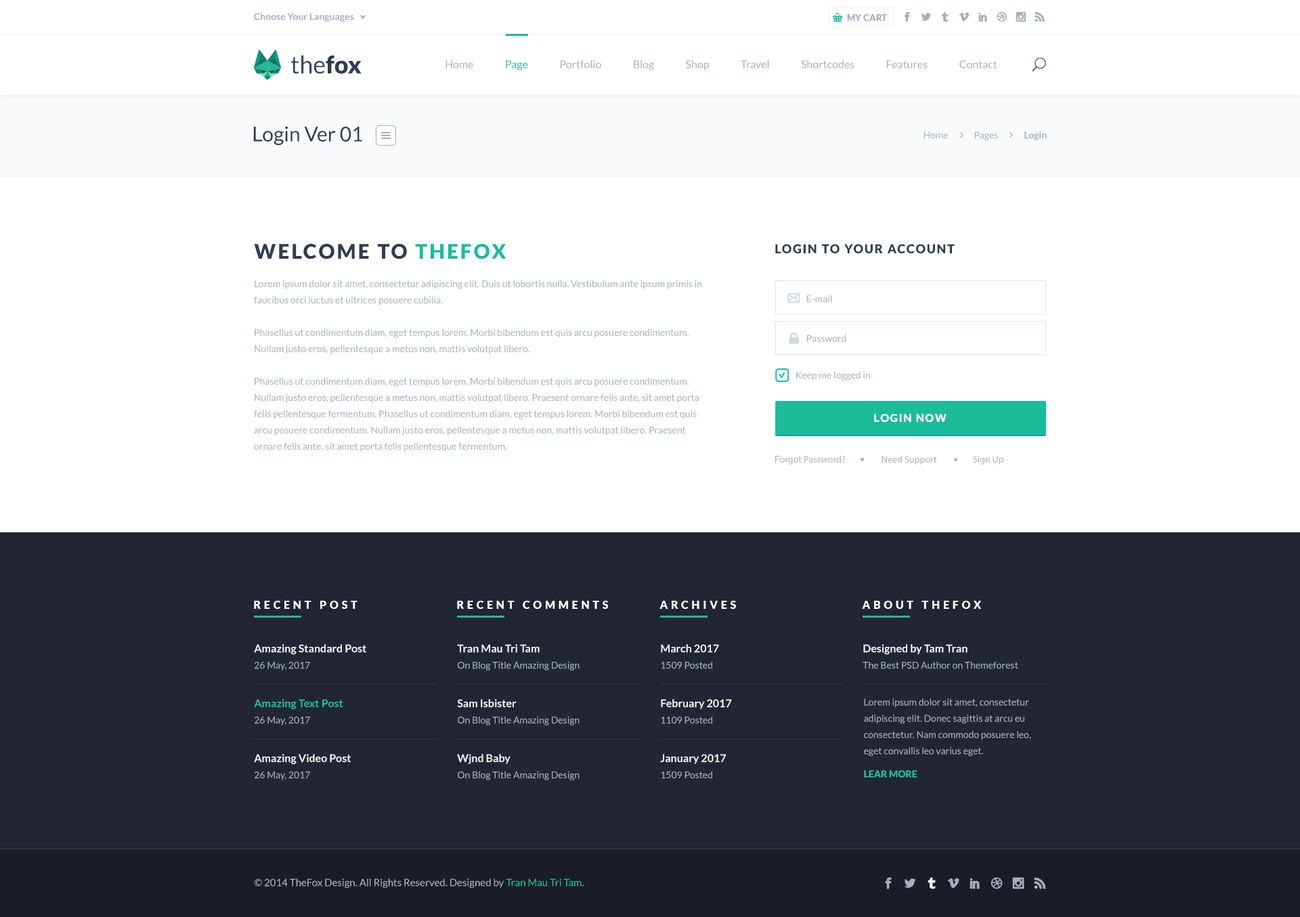
<style>
.page{position:relative;width:1300px;height:917px;background:#ffffff}
.page>*{position:absolute;margin:0}
.t1{font:9.5px "Lato-Bold";color:#a1b1bc}
.t2{font:8.8px "Lato-Black";color:#a1b1bc;text-transform:uppercase}
.t3{font:24.4px "Lato-Regular";color:#34495e}
.t4{font:24.4px "Lato-Black";color:#2c3e50}
.t5{font:10.8px "Lato-Regular";color:#a1b1bc}
.t6{font:10.8px "Lato-Regular";color:#1abc9c}
.t7{font:20.3px "Lato-Regular";color:#2c3e50}
.t8{font:9.5px "Lato-Regular";color:#a1b1bc}
.t9{font:20.3px "Lato-Black";letter-spacing:0.1em;color:#2c3e50;text-transform:uppercase}
.t10{font:20.3px "Lato-Black";letter-spacing:0.1em;color:#1abc9c;text-transform:uppercase}
.t11{font:12.2px "Lato-Black";letter-spacing:0.1em;color:#2c3e50;text-transform:uppercase}
.t12{font:9.5px/16.3px "Lato-Regular";color:#a1b1bc}
.t13{font:10.8px "Lato-Black";letter-spacing:0.1em;color:#ffffff}
.t14{font:9.5px "MyriadPro-Regular";color:#a1b1bc}
.t15{font:10.8px "Lato-Black";letter-spacing:0.3em;color:#ffffff}
.t16{font:10.8px/16.3px "Lato-Bold";color:#ecf0f1}
.t17{font:10.8px/16.3px "Lato-Bold";color:#1abc9c}
.t18{font:9.5px "Lato-Black";color:#1abc9c}
.t19{font:10.2px "Lato-Regular";color:#a1b1bc}
.t20{font:10.2px "Lato-Regular";color:#1abc9c}
</style>
<div class="page">
<p class="t1" style="left:254px;top:13px;width:100px;height:9px">Choose Your Languages</p>
<p class="t2" style="left:847px;top:14px;width:40px;height:7px">my cart</p>
<p class="t3" style="left:291px;top:55px;width:71px;height:19px">the<span class="t4">fox</span></p>
<p class="t5" style="left:446px;top:60px;width:552px;height:10px">Home               <span class="t6">Page</span>               Portfolio               Blog               Shop               Travel               Shortcodes               Features               Contact</p>
<p class="t7" style="left:253px;top:126px;width:109px;height:20px">Login Ver 01</p>
<p class="t8" style="left:924px;top:131px;width:123px;height:9px">Home              Pages              <span class="t1">Login</span></p>
<p class="t9" style="left:254px;top:244px;width:253px;height:15px">WELCOME TO <span class="t10">THEFOX</span></p>
<p class="t11" style="left:775px;top:244px;width:180px;height:9px">LOGIN TO YOUR ACCOUNT</p>
<p class="t12" style="left:254px;top:280px;width:448px;height:172px">Lorem ipsum dolor sit amet, consectetur adipiscing elit. Duis ut lobortis nulla. Vestibulum ante ipsum primis in faucibus orci luctus et ultrices posuere cubilia.<br><br>Phasellus ut condimentum diam, eget tempus lorem. Morbi bibendum est quis arcu posuere condimentum. Nullam justo eros, pellentesque a metus non, mattis volutpat libero.<br><br>Phasellus ut condimentum diam, eget tempus lorem. Morbi bibendum est quis arcu posuere condimentum. Nullam justo eros, pellentesque a metus non, mattis volutpat libero. Praesent ornare felis ante, sit amet porta felis pellentesque fermentum. Phasellus ut condimentum diam, eget tempus lorem. Morbi bibendum est quis arcu posuere condimentum. Nullam justo eros, pellentesque a metus non, mattis volutpat libero. Praesent ornare felis ante, sit amet porta felis pellentesque fermentum.</p>
<p class="t8" style="left:807px;top:295px;width:25px;height:8px">E-mail</p>
<p class="t8" style="left:807px;top:335px;width:40px;height:7px">Password</p>
<p class="t8" style="left:796px;top:371px;width:74px;height:10px">Keep me logged in</p>
<p class="t13" style="left:874px;top:414px;width:73px;height:8px">LOGIN NOW</p>
<p class="t14" style="left:775px;top:456px;width:229px;height:9px"><span class="t8">F</span>orgot Password?                  Need Support                  Sign Up</p>
<p class="t15" style="left:254px;top:601px;width:104px;height:8px">RECENT POST</p>
<p class="t15" style="left:457px;top:601px;width:151px;height:8px">RECENT COMMENTS</p>
<p class="t15" style="left:660px;top:601px;width:76px;height:8px">ARCHIVES</p>
<p class="t15" style="left:862px;top:601px;width:119px;height:8px">ABOUT THEFOX</p>
<p class="t16" style="left:254px;top:644px;width:112px;height:26px">Amazing Standard Post<br><span class="t12">26 May, 2017</span></p>
<p class="t12" style="left:457px;top:644px;width:123px;height:26px"><span class="t16">Tran Mau Tri Tam<br></span>On Blog Title Amazing Design</p>
<p class="t12" style="left:661px;top:644px;width:58px;height:25px"><span class="t16">March 2017<br></span>1509 Posted</p>
<p class="t12" style="left:863px;top:644px;width:156px;height:25px"><span class="t16">Designed by Tam Tran<br></span>The Best PSD Author on Themeforest</p>
<p class="t17" style="left:254px;top:699px;width:89px;height:26px">Amazing Text Post<br><span class="t12">26 May, 2017</span></p>
<p class="t12" style="left:457px;top:699px;width:123px;height:26px"><span class="t16">Sam Isbister<br></span>On Blog Title Amazing Design</p>
<p class="t16" style="left:661px;top:699px;width:71px;height:25px">February 2017<br><span class="t12">1109 Posted</span></p>
<p class="t12" style="left:864px;top:698px;width:167px;height:59px">Lorem ipsum dolor sit amet, consectetur adipiscing elit. Donec sagittis at arcu eu consectetur. Nam commodo posuere leo, eget convallis leo varius eget.</p>
<p class="t16" style="left:254px;top:754px;width:97px;height:26px">Amazing Video Post<br><span class="t12">26 May, 2017</span></p>
<p class="t12" style="left:457px;top:754px;width:123px;height:26px"><span class="t16">Wjnd Baby<br></span>On Blog Title Amazing Design</p>
<p class="t16" style="left:660px;top:754px;width:66px;height:25px">January 2017<br><span class="t12">1509 Posted</span></p>
<p class="t18" style="left:864px;top:770px;width:54px;height:7px">LEAR MORE</p>
<p class="t19" style="left:254px;top:878px;width:330px;height:10px">© 2014 TheFox Design. All Rights Reserved. Designed by <span class="t20">Tran Mau Tri Tam</span>.</p>
</div>
